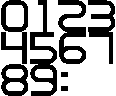
<style>
.page{position:relative;width:116px;height:96px;background:#ffffff}
.page>*{position:absolute;margin:0}
.t1{font:48px "AquireRegular";letter-spacing:0.05em;color:#000000}
.t2{font:48px "Stark";letter-spacing:0.05em;color:#000000}
</style>
<div class="page">
<p class="t1" style="left:1px;top:0px;width:27px;height:32px">0</p>
<p class="t1" style="left:38px;top:0px;width:9px;height:32px">1</p>
<p class="t1" style="left:58px;top:0px;width:28px;height:32px">2</p>
<p class="t1" style="left:88px;top:0px;width:27px;height:32px">3</p>
<p class="t1" style="left:1px;top:32px;width:26px;height:32px">4</p>
<p class="t1" style="left:30px;top:32px;width:27px;height:32px">5</p>
<p class="t1" style="left:59px;top:32px;width:27px;height:32px">6</p>
<p class="t1" style="left:89px;top:32px;width:24px;height:32px">7</p>
<p class="t1" style="left:1px;top:64px;width:27px;height:32px">8</p>
<p class="t1" style="left:30px;top:64px;width:27px;height:32px">9</p>
<p class="t2" style="left:61px;top:72px;width:7px;height:19px">:</p>
</div>
